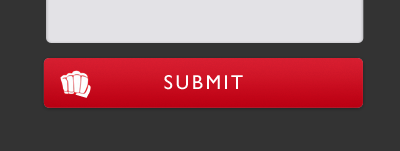
<style>
.page{position:relative;width:400px;height:151px;background:#333333}
.page>*{position:absolute;margin:0}
.t1{font:20px "GillSans";letter-spacing:0.12em;color:#ffffff;text-transform:uppercase}
</style>
<div class="page">
<p class="t1" style="left:164px;top:75px;width:79px;height:15px">submit</p>
</div>
